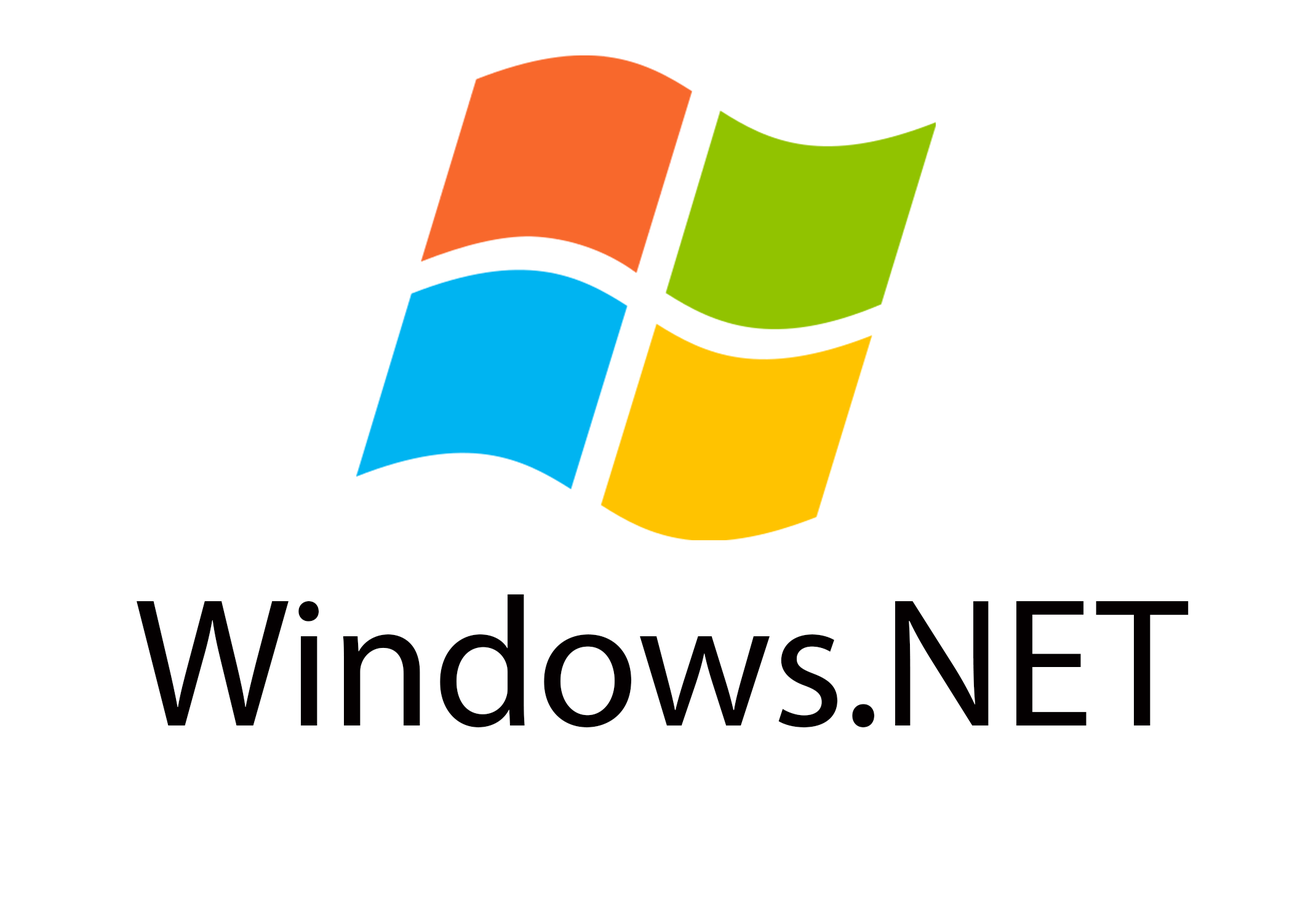
<style>
.page{position:relative;width:1292px;height:923px;background:#ffffff}
.page>*{position:absolute;margin:0}
.t1{font:184.6px "MyriadPro-Regular";color:#040001}
</style>
<div class="page">
<p class="t1" style="left:137px;top:594px;width:1052px;height:133px">Windows.NET</p>
</div>
